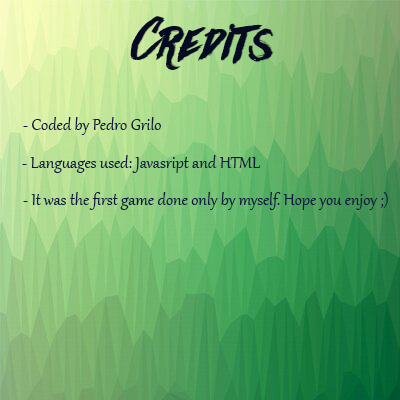
<style>
.page{position:relative;width:400px;height:400px}
.page>*{position:absolute;margin:0}
.t1{font:60px "Againts";color:#060b23}
.t2{font:60px "Againts";color:#131936}
.t3{font:20px "Gabriola";color:#0f1740}
</style>
<div class="page">
<p class="t1" style="left:130px;top:16px;width:143px;height:54px">Credits</p>
<p class="t2" style="left:131px;top:16px;width:143px;height:54px">Credits</p>
<p class="t3" style="left:23px;top:117px;width:138px;height:18px">- Coded by Pedro Grilo</p>
<p class="t3" style="left:22px;top:155px;width:239px;height:18px">- Languages used: Javasript and HTML</p>
<p class="t3" style="left:23px;top:192px;width:365px;height:18px">- It was the first game done only by myself. Hope you enjoy ;)</p>
</div>
